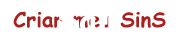
<style>
.page{position:relative;width:180px;height:40px;background:#ffffff}
.page>*{position:absolute;margin:0}
.t1{font:20.8px "ComicSansMS-Bold";color:#ac1f1f}
</style>
<div class="page">
<p class="t1" style="left:13px;top:11px;width:153px;height:18px">Criar meu SinS</p>
</div>
